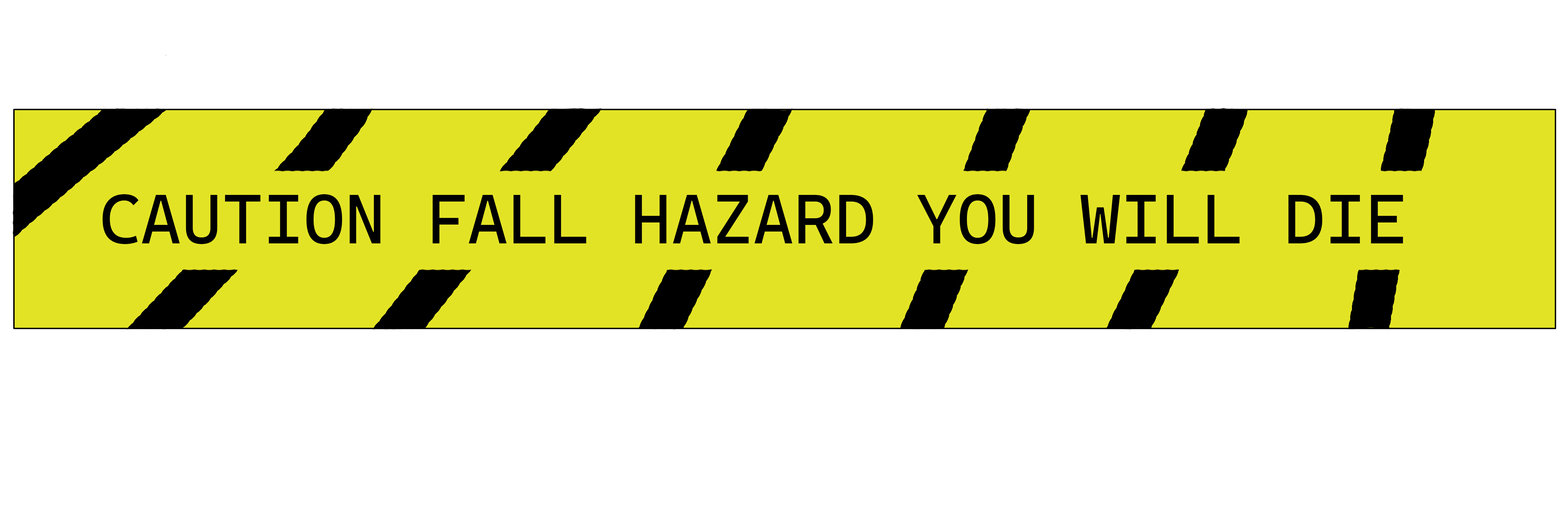
<style>
.page{position:relative;width:1568px;height:523px;background:#ffffff}
.page>*{position:absolute;margin:0}
.t1{font:69.7px "CascadiaCode-Roman";color:#000000}
</style>
<div class="page">
<p class="t1" style="left:102px;top:194px;width:1301px;height:50px">CAUTION FALL HAZARD YOU WILL DIE</p>
</div>
